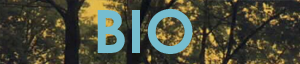
<style>
.page{position:relative;width:300px;height:64px}
.page>*{position:absolute;margin:0}
.t1{font:60px "CenturyGothic-Bold";color:#76bdcf}
</style>
<div class="page">
<p class="t1" style="left:97px;top:9px;width:96px;height:45px">BIO</p>
</div>
